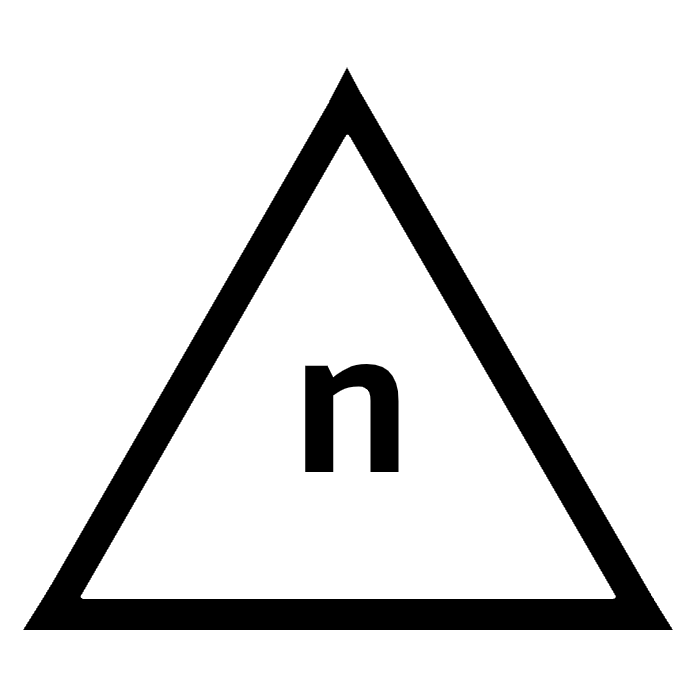
<style>
.page{position:relative;width:700px;height:700px;background:#ffffff}
.page>*{position:absolute;margin:0}
.t1{font:200px "Mina-Bold";color:#000000}
</style>
<div class="page">
<p class="t1" style="left:305px;top:364px;width:94px;height:108px">n</p>
</div>
